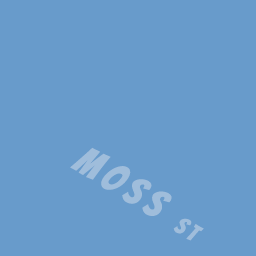
<style>
.page{position:relative;width:256px;height:256px;background:#689bcb}
.page>*{position:absolute;margin:0}
.t1{font:40px "Bangers-Regular";letter-spacing:0.16em;color:#9fbddb}
.t2{font:24px "Bangers-Regular";letter-spacing:0.16em;color:#9fbddb}
</style>
<div class="page">
<p class="t1" style="left:70px;top:147px;width:134px;height:94px;rotate:31deg">MOSS <span class="t2">ST</span></p>
</div>
